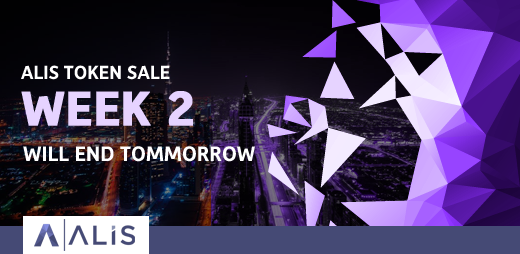
<style>
.page{position:relative;width:520px;height:254px}
.page>*{position:absolute;margin:0}
.t1{font:19.2px/45.8px "Depot-Bold";color:#ffffff;text-transform:uppercase}
.t2{font:49px/45.8px "Depot-Bold";color:#e6d3ff;text-transform:uppercase;font-weight:bold}
.t3{font:21.3px "Depot-Bold";color:#ffffff;text-transform:uppercase}
</style>
<div class="page">
<p class="t1" style="left:21px;top:65px;width:172px;height:61px">ALIS TOKEN SALE<br><span class="t2">WEEK 2</span></p>
<p class="t3" style="left:23px;top:146px;width:232px;height:16px">will end tommorrow</p>
</div>
